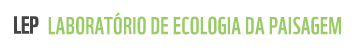
<style>
.page{position:relative;width:356px;height:50px;background:#ffffff}
.page>*{position:absolute;margin:0}
.t1{font:24px "WWF";letter-spacing:-0.025em;color:#444444;font-weight:bold}
.t2{font:24px "WWF";letter-spacing:0.01em;color:#99cc66}
</style>
<div class="page">
<p class="t1" style="left:14px;top:16px;width:25px;height:18px">LEP</p>
<p class="t2" style="left:48px;top:12px;width:293px;height:23px">LABORATÓRIO DE ECOLOGIA DA PAISAGEM</p>
</div>
